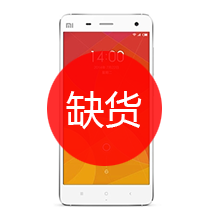
<style>
.page{position:relative;width:215px;height:215px;background:#ffffff}
.page>*{position:absolute;margin:0}
.t1{font:37.5px "MicrosoftYaHei";color:#ffffff}
</style>
<div class="page">
<p class="t1" style="left:66px;top:91px;width:76px;height:39px">缺货</p>
</div>
